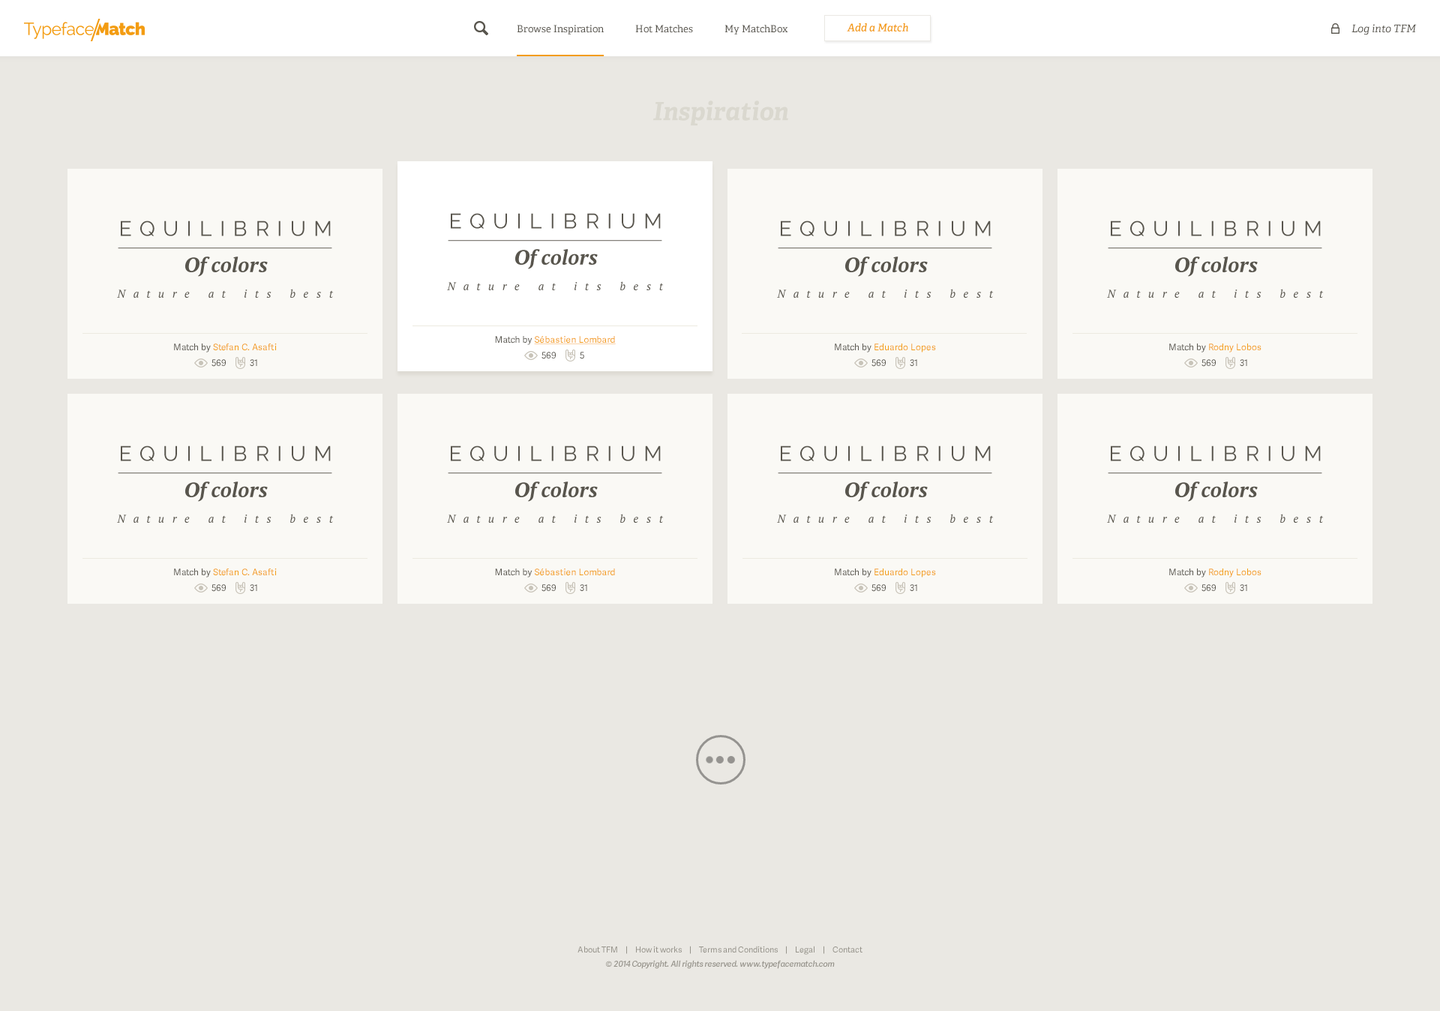
<style>
.page{position:relative;width:1440px;height:1011px;background:#eae8e3}
.page>*{position:absolute;margin:0}
.t1{font:9.8px "Adelle-Regular";color:#58554d}
.t2{font:10.5px "Adelle-SemiBoldItalic";color:#f39c12}
.t3{font:10.5px "Adelle-Italic";color:#58554d}
.t4{font:25.1px "Adelle-BoldItalic";color:#d9d5ca}
.t5{font:21px/16.2px "Raleway";letter-spacing:0.38em;color:#58554d;text-transform:uppercase}
.t6{font:20.4px/36.2px "PTSerif-BoldItalic";color:#58554d}
.t7{font:10.9px "PTSerif-Italic";letter-spacing:0.74em;color:#58554d}
.t8{font:9px "AdelleSans";color:#f39c12;text-decoration:underline}
.t9{font:9px "AdelleSans";color:#58554d}
.t10{font:9px "AdelleSans";color:#f39c12}
.t11{font:8.2px "AdelleSans";color:#97948c}
.t12{font:8.2px "AdelleSans-SemiBoldItalic";color:#97948c}
</style>
<div class="page">
<p class="t1" style="left:517px;top:25px;width:271px;height:9px">Browse Inspiration              Hot Matches              My MatchBox</p>
<p class="t2" style="left:847px;top:23px;width:61px;height:9px">Add a Match</p>
<p class="t3" style="left:1352px;top:24px;width:65px;height:11px">Log into TFM</p>
<p class="t4" style="left:653px;top:100px;width:135px;height:26px">Inspiration</p>
<p class="t5" style="left:121px;top:220px;width:210px;height:57px;text-align:center">equilibrium<br><span class="t6">Of colors</span></p>
<p class="t5" style="left:451px;top:213px;width:210px;height:56px;text-align:center">equilibrium<br><span class="t6">Of colors</span></p>
<p class="t5" style="left:781px;top:220px;width:210px;height:57px;text-align:center">equilibrium<br><span class="t6">Of colors</span></p>
<p class="t5" style="left:1111px;top:220px;width:210px;height:57px;text-align:center">equilibrium<br><span class="t6">Of colors</span></p>
<p class="t7" style="left:447px;top:281px;width:216px;height:9px">Nature at its best</p>
<p class="t7" style="left:117px;top:289px;width:216px;height:9px">Nature at its best</p>
<p class="t7" style="left:777px;top:289px;width:216px;height:9px">Nature at its best</p>
<p class="t7" style="left:1107px;top:289px;width:216px;height:9px">Nature at its best</p>
<p class="t8" style="left:495px;top:336px;width:121px;height:9px"><span class="t9">Match by </span>Sébastien Lombard</p>
<p class="t10" style="left:174px;top:344px;width:103px;height:8px"><span class="t9">Match by </span>Stefan C. Asafti</p>
<p class="t9" style="left:542px;top:352px;width:14px;height:7px">569</p>
<p class="t9" style="left:580px;top:352px;width:4px;height:7px">5</p>
<p class="t10" style="left:835px;top:344px;width:101px;height:8px"><span class="t9">Match by </span>Eduardo Lopes</p>
<p class="t10" style="left:1169px;top:344px;width:93px;height:8px"><span class="t9">Match by </span>Rodny Lobos</p>
<p class="t9" style="left:212px;top:359px;width:14px;height:8px">569</p>
<p class="t9" style="left:250px;top:359px;width:7px;height:7px">31</p>
<p class="t9" style="left:872px;top:359px;width:14px;height:8px">569</p>
<p class="t9" style="left:910px;top:359px;width:7px;height:7px">31</p>
<p class="t9" style="left:1202px;top:359px;width:14px;height:8px">569</p>
<p class="t9" style="left:1240px;top:359px;width:7px;height:7px">31</p>
<p class="t5" style="left:121px;top:446px;width:210px;height:56px;text-align:center">equilibrium<br><span class="t6">Of colors</span></p>
<p class="t5" style="left:451px;top:446px;width:210px;height:56px;text-align:center">equilibrium<br><span class="t6">Of colors</span></p>
<p class="t5" style="left:781px;top:446px;width:210px;height:56px;text-align:center">equilibrium<br><span class="t6">Of colors</span></p>
<p class="t5" style="left:1111px;top:446px;width:210px;height:56px;text-align:center">equilibrium<br><span class="t6">Of colors</span></p>
<p class="t7" style="left:117px;top:514px;width:216px;height:9px">Nature at its best</p>
<p class="t7" style="left:447px;top:514px;width:216px;height:9px">Nature at its best</p>
<p class="t7" style="left:777px;top:514px;width:216px;height:9px">Nature at its best</p>
<p class="t7" style="left:1107px;top:514px;width:216px;height:9px">Nature at its best</p>
<p class="t10" style="left:174px;top:568px;width:103px;height:10px"><span class="t9">Match by </span>Stefan C. Asafti</p>
<p class="t10" style="left:495px;top:568px;width:120px;height:10px"><span class="t9">Match by </span>Sébastien Lombard</p>
<p class="t10" style="left:835px;top:568px;width:101px;height:10px"><span class="t9">Match by </span>Eduardo Lopes</p>
<p class="t10" style="left:1169px;top:568px;width:93px;height:10px"><span class="t9">Match by </span>Rodny Lobos</p>
<p class="t9" style="left:212px;top:584px;width:14px;height:8px">569</p>
<p class="t9" style="left:250px;top:584px;width:7px;height:7px">31</p>
<p class="t9" style="left:542px;top:584px;width:14px;height:8px">569</p>
<p class="t9" style="left:580px;top:584px;width:7px;height:7px">31</p>
<p class="t9" style="left:872px;top:584px;width:14px;height:8px">569</p>
<p class="t9" style="left:910px;top:584px;width:7px;height:7px">31</p>
<p class="t9" style="left:1202px;top:584px;width:14px;height:8px">569</p>
<p class="t9" style="left:1240px;top:584px;width:7px;height:7px">31</p>
<p class="t11" style="left:578px;top:946px;width:284px;height:9px">About TFM     |     How it works     |     Terms and Conditions     |     Legal     |     Contact</p>
<p class="t12" style="left:606px;top:960px;width:229px;height:9px">© 2014 Copyright. All rights reserved. www.typefacematch.com</p>
</div>
